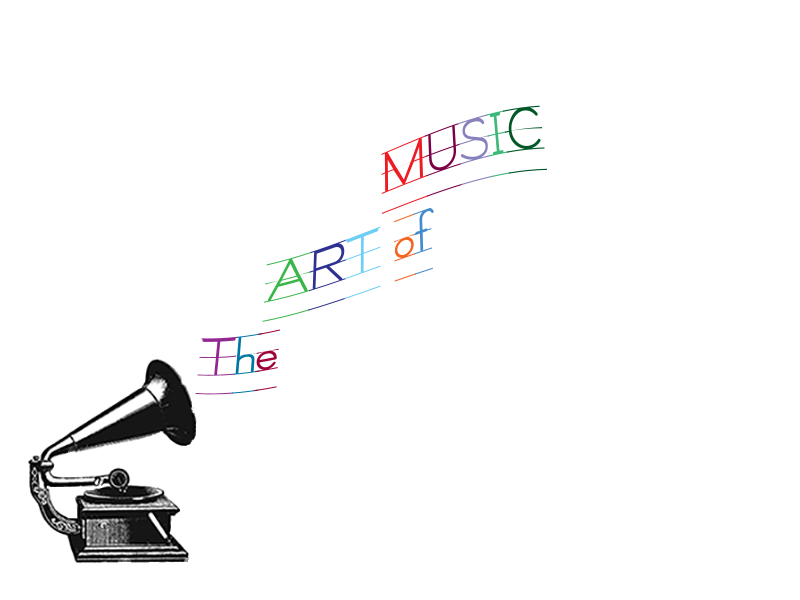
<style>
.page{position:relative;width:800px;height:600px;background:#ffffff}
.page>*{position:absolute;margin:0}
.t1{font:60px "SchoolHousePrintedA";color:#ed1c24}
.t2{font:48px "SchoolHousePrintedA";color:#070707}
.t3{font:60px "SchoolHousePrintedA";color:#7b0046}
.t4{font:60px "SchoolHousePrintedA";color:#8781bd}
.t5{font:60px "SchoolHousePrintedA";color:#3cb878}
.t6{font:60px "SchoolHousePrintedA";color:#005826}
.t7{font:60px "SchoolHousePrintedA";color:#39b54a}
.t8{font:60px "SchoolHousePrintedA";color:#2e3192}
.t9{font:60px "SchoolHousePrintedA";color:#6dcff6}
.t10{font:60px "SchoolHousePrintedA";color:#f26522}
.t11{font:60px "SchoolHousePrintedA";color:#448ccb}
.t12{font:60px "SchoolHousePrintedA";color:#92278f}
.t13{font:60px "SchoolHousePrintedA";color:#0076a3}
.t14{font:60px "SchoolHousePrintedA";color:#9e0039}
</style>
<div class="page">
<p class="t1" style="left:195px;top:105px;width:352px;height:290px"><span class="t2">              </span>M<span class="t3">U</span><span class="t4">S</span><span class="t5">I</span><span class="t6">C<br>    </span><span class="t7">A</span><span class="t8">R</span><span class="t9">T </span><span class="t10">o</span><span class="t11">f<br></span><span class="t12">T</span><span class="t13">h</span><span class="t14">e</span></p>
</div>
